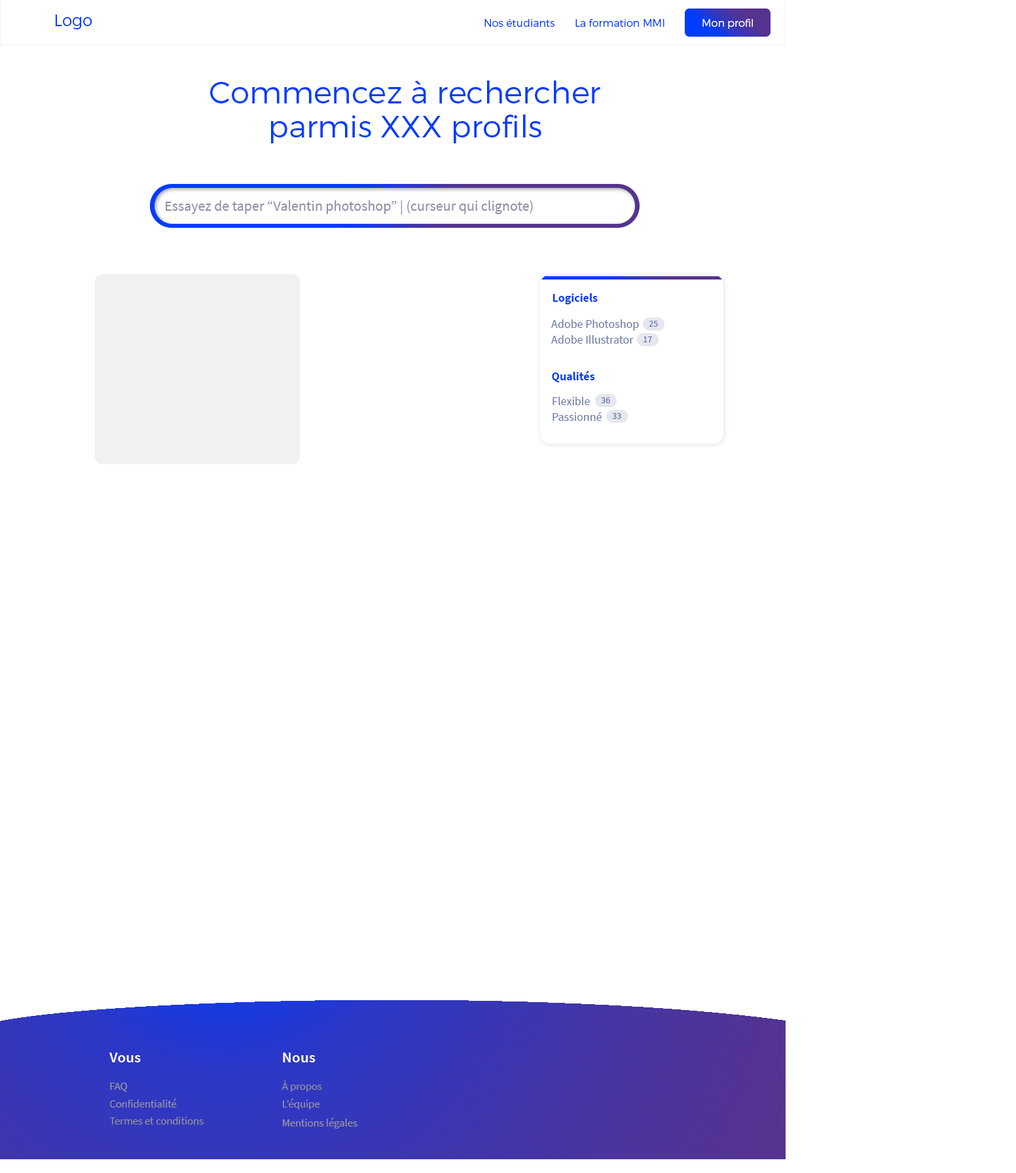
<style>
.page{position:relative;width:1016px;height:1173px;background:#ffffff}
.page>*{position:absolute;margin:0}
.t1{font:16.4px "Montserrat-Light";color:#003cff}
.t2{font:10.5px "Montserrat-Light";color:#003cff}
.t3{font:10.5px "Montserrat-Light";color:#ffffff}
.t4{font:30.8px/34px "Montserrat-Light";color:#003cff}
.t5{font:14.4px "SourceSansPro-Regular";color:#8e8ea7}
.t6{font:11.8px "SourceSansPro-Bold";color:#003cff}
.t7{font:11.8px "SourceSansPro-Regular";color:#6473a5}
.t8{font:9.2px "SourceSansPro-Regular";color:#6473a5}
.t9{font:15.4px "SourceSansPro-Semibold";color:#ffffff}
.t10{font:10.8px "SourceSansPro-Regular";color:#999999}
.t11{font:10.8px "SourceSansPro-Regular";color:#929497}
</style>
<div class="page">
<p class="t1" style="left:55px;top:14px;width:37px;height:15px">Logo</p>
<p class="t2" style="left:485px;top:19px;width:70px;height:8px">Nos étudiants</p>
<p class="t2" style="left:576px;top:19px;width:89px;height:8px">La formation MMI</p>
<p class="t3" style="left:703px;top:19px;width:50px;height:10px">Mon profil</p>
<p class="t4" style="left:210px;top:81px;width:390px;height:62px;text-align:center">Commencez à rechercher parmis XXX profils</p>
<p class="t5" style="left:166px;top:200px;width:367px;height:15px">Essayez de taper “Valentin photoshop” | (curseur qui clignote)</p>
<p class="t6" style="left:553px;top:293px;width:45px;height:11px">Logiciels</p>
<p class="t7" style="left:551px;top:320px;width:88px;height:11px">Adobe Photoshop</p>
<p class="t8" style="left:649px;top:321px;width:9px;height:6px">25</p>
<p class="t7" style="left:551px;top:335px;width:83px;height:9px">Adobe Illustrator</p>
<p class="t8" style="left:644px;top:337px;width:8px;height:5px">17</p>
<p class="t6" style="left:552px;top:371px;width:43px;height:11px">Qualités</p>
<p class="t7" style="left:553px;top:397px;width:37px;height:8px">Flexible</p>
<p class="t8" style="left:601px;top:397px;width:9px;height:6px">36</p>
<p class="t7" style="left:553px;top:412px;width:49px;height:9px">Passionné</p>
<p class="t8" style="left:612px;top:413px;width:9px;height:6px">33</p>
<p class="t9" style="left:109px;top:1053px;width:32px;height:10px">Vous</p>
<p class="t9" style="left:283px;top:1053px;width:33px;height:10px">Nous</p>
<p class="t10" style="left:110px;top:1083px;width:18px;height:9px">FAQ</p>
<p class="t11" style="left:282px;top:1080px;width:40px;height:12px">À propos</p>
<p class="t10" style="left:110px;top:1099px;width:67px;height:9px">Confidentialité</p>
<p class="t10" style="left:283px;top:1099px;width:37px;height:11px">L’équipe</p>
<p class="t11" style="left:109px;top:1117px;width:95px;height:8px">Termes et conditions</p>
<p class="t10" style="left:283px;top:1118px;width:75px;height:11px">Mentions légales</p>
</div>
